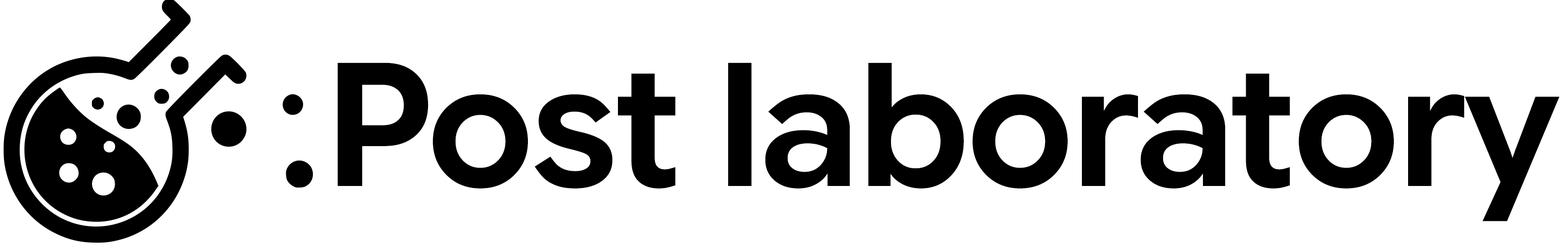
<style>
.page{position:relative;width:1568px;height:246px;background:#ffffff}
.page>*{position:absolute;margin:0}
.t1{font:171.9px "GoogleSansFlex_76.000opsz_611.000wght";color:#000000;font-weight:bold}
</style>
<div class="page">
<p class="t1" style="left:338px;top:62px;width:1222px;height:159px">Post laboratory</p>
</div>
